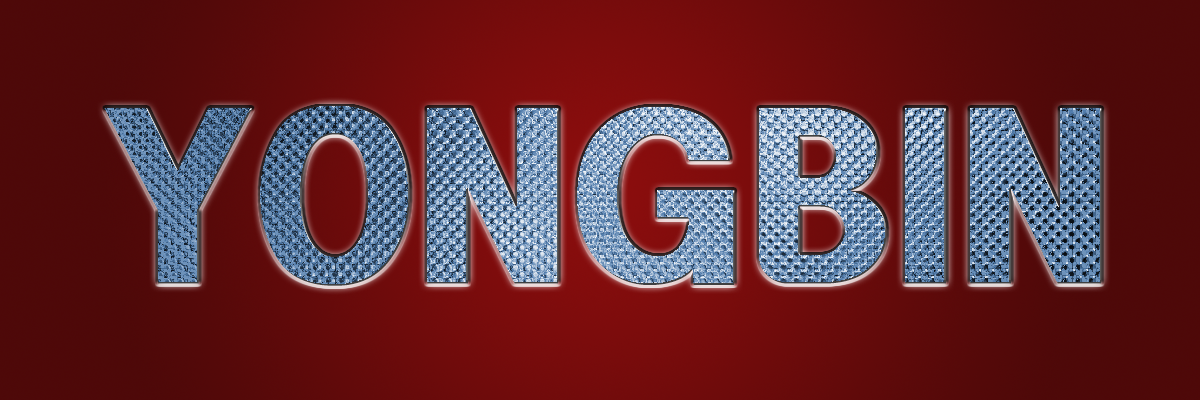
<style>
.page{position:relative;width:1200px;height:400px}
.page>*{position:absolute;margin:0}
.t1{font:200px "HeadlineR-HM";letter-spacing:-0.036em}
</style>
<div class="page">
<p class="t1" style="left:104px;top:106px;width:998px;height:180px">YONGBIN</p>
</div>
